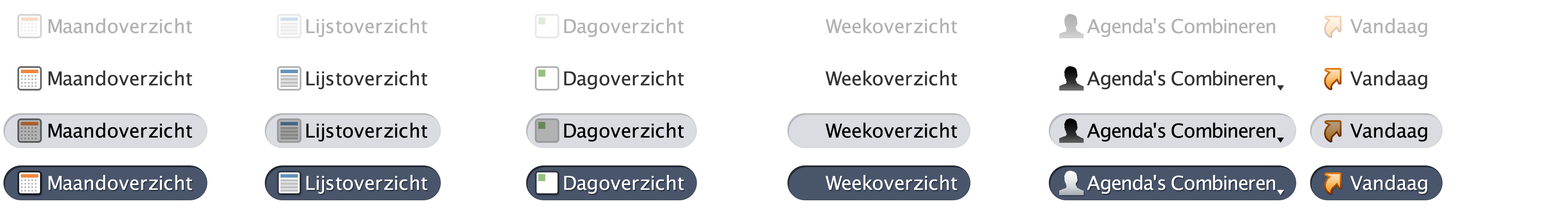
<style>
.page{position:relative;width:1568px;height:209px;background:#ffffff}
.page>*{position:absolute;margin:0}
.t1{font:19.2px "LucidaGrande";letter-spacing:-0.01em;color:#b2b2b2}
.t2{font:19.2px "LucidaGrande";letter-spacing:-0.05em;color:#b2b2b2}
.t3{font:19.2px "LucidaGrande";letter-spacing:-0.01em;color:#333333}
.t4{font:19.2px "LucidaGrande";letter-spacing:-0.05em;color:#333333}
.t5{font:19.2px "LucidaGrande";letter-spacing:-0.01em;color:#000000}
.t6{font:19.2px "LucidaGrande";letter-spacing:-0.05em;color:#000000}
.t7{font:19.2px "LucidaGrande";letter-spacing:-0.01em;color:#ffffff}
.t8{font:19.2px "LucidaGrande";letter-spacing:-0.05em;color:#ffffff}
</style>
<div class="page">
<p class="t1" style="left:48px;top:18px;width:144px;height:16px">Maandoverzicht</p>
<p class="t1" style="left:306px;top:18px;width:121px;height:19px">Lijstoverzicht</p>
<p class="t1" style="left:564px;top:18px;width:120px;height:19px">Dagoverzicht</p>
<p class="t1" style="left:825px;top:18px;width:132px;height:16px">Weekoverzicht</p>
<p class="t2" style="left:1087px;top:18px;width:188px;height:19px">Agenda's Combineren</p>
<p class="t1" style="left:1350px;top:18px;width:77px;height:19px">Vandaag</p>
<p class="t3" style="left:48px;top:70px;width:144px;height:16px">Maandoverzicht</p>
<p class="t3" style="left:306px;top:70px;width:121px;height:19px">Lijstoverzicht</p>
<p class="t3" style="left:564px;top:70px;width:120px;height:19px">Dagoverzicht</p>
<p class="t3" style="left:825px;top:70px;width:132px;height:16px">Weekoverzicht</p>
<p class="t4" style="left:1087px;top:70px;width:188px;height:19px">Agenda's Combineren</p>
<p class="t3" style="left:1350px;top:70px;width:77px;height:19px">Vandaag</p>
<p class="t5" style="left:48px;top:122px;width:144px;height:16px">Maandoverzicht</p>
<p class="t5" style="left:306px;top:122px;width:121px;height:20px">Lijstoverzicht</p>
<p class="t5" style="left:564px;top:122px;width:120px;height:20px">Dagoverzicht</p>
<p class="t5" style="left:825px;top:122px;width:132px;height:16px">Weekoverzicht</p>
<p class="t6" style="left:1087px;top:122px;width:188px;height:20px">Agenda's Combineren</p>
<p class="t5" style="left:1350px;top:122px;width:77px;height:20px">Vandaag</p>
<p class="t7" style="left:48px;top:175px;width:144px;height:15px">Maandoverzicht</p>
<p class="t7" style="left:306px;top:175px;width:121px;height:19px">Lijstoverzicht</p>
<p class="t7" style="left:564px;top:175px;width:120px;height:19px">Dagoverzicht</p>
<p class="t7" style="left:825px;top:175px;width:132px;height:15px">Weekoverzicht</p>
<p class="t8" style="left:1087px;top:175px;width:188px;height:19px">Agenda's Combineren</p>
<p class="t7" style="left:1350px;top:175px;width:77px;height:19px">Vandaag</p>
</div>
